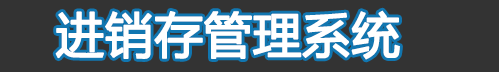
<style>
.page{position:relative;width:499px;height:72px;background:#333333}
.page>*{position:absolute;margin:0}
.t1{font:48px "MicrosoftYaHei";color:#ffffff;font-weight:bold}
</style>
<div class="page">
<p class="t1" style="left:55px;top:10px;width:345px;height:50px">进销存管理系统</p>
</div>
